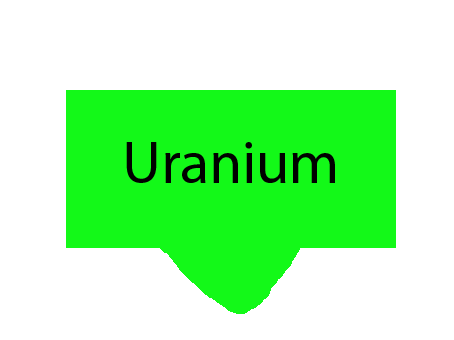
<style>
.page{position:relative;width:454px;height:340px;background:#ffffff}
.page>*{position:absolute;margin:0}
.t1{font:60px "MyriadPro-Regular";color:#000000}
</style>
<div class="page">
<p class="t1" style="left:126px;top:142px;width:209px;height:41px">Uranium</p>
</div>
